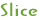
<style>
.page{position:relative;width:40px;height:20px;background:#ffffff}
.page>*{position:absolute;margin:0}
.t1{font:15.9px "ArchitecturePlain";color:#6ea337;scale:1.8 1}
</style>
<div class="page">
<p class="t1" style="left:0px;top:2px;width:38px;height:15px">Slice</p>
</div>
